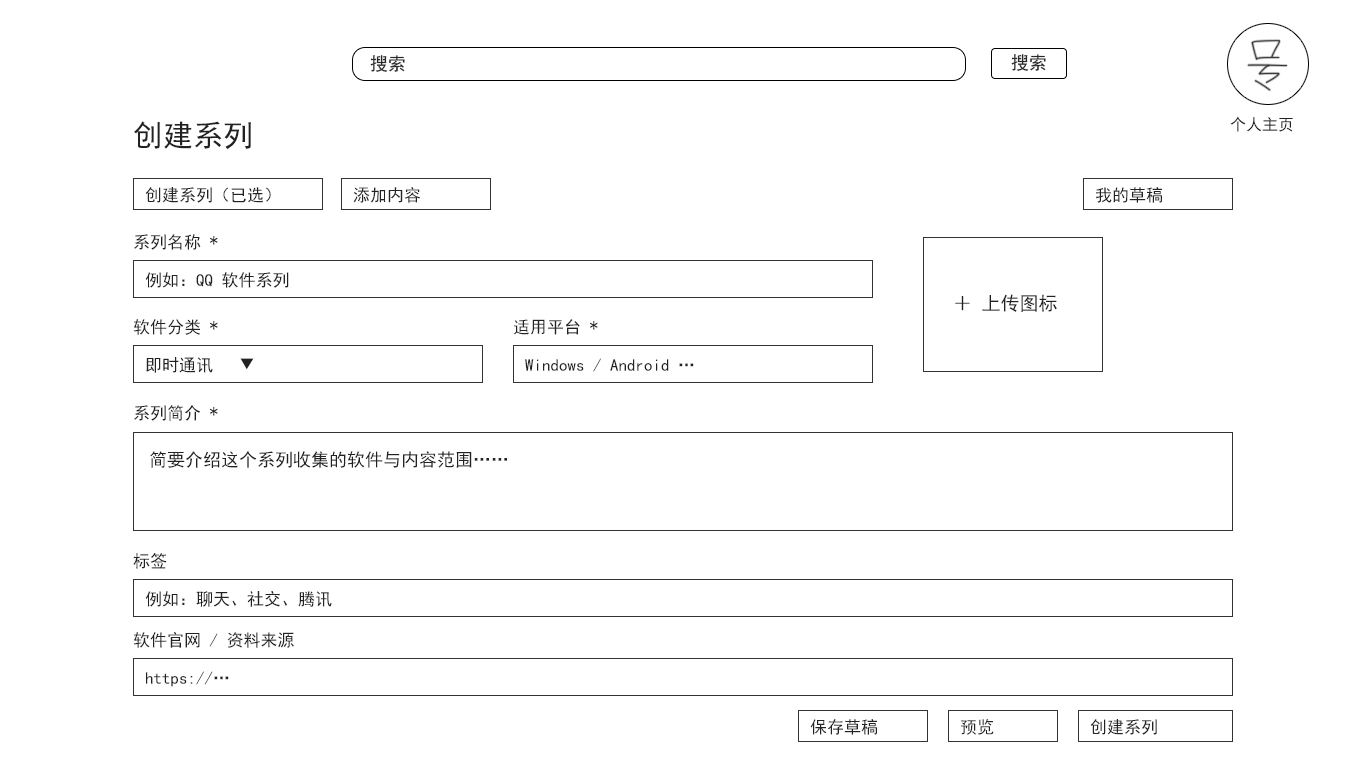
<style>
.page{position:relative;width:1366px;height:768px;background:#ffffff}
.page>*{position:absolute;margin:0}
.t1{font:18px "SimHei";color:#282828}
.t2{font:30px "SimHei";color:#222222}
.t3{font:16px "SimHei";color:#222222}
.t4{font:17px "SimHei";color:#222222}
.t5{font:19px "SimHei";color:#222222}
.t6{font:18px "SimHei";color:#222222}
</style>
<div class="page">
<p class="t1" style="left:1011px;top:54px;width:35px;height:17px">搜索</p>
<p class="t1" style="left:370px;top:55px;width:35px;height:17px">搜索</p>
<p class="t2" style="left:134px;top:121px;width:117px;height:29px">创建系列</p>
<p class="t3" style="left:1230px;top:116px;width:63px;height:16px">个人主页</p>
<p class="t4" style="left:145px;top:187px;width:126px;height:16px">创建系列（已选）</p>
<p class="t4" style="left:353px;top:187px;width:67px;height:16px">添加内容</p>
<p class="t4" style="left:1096px;top:187px;width:66px;height:16px">我的草稿</p>
<p class="t4" style="left:134px;top:234px;width:84px;height:16px">系列名称 *</p>
<p class="t4" style="left:145px;top:272px;width:144px;height:16px">例如：QQ 软件系列</p>
<p class="t5" style="left:955px;top:294px;width:102px;height:18px">＋ 上传图标</p>
<p class="t4" style="left:133px;top:319px;width:85px;height:16px">软件分类 *</p>
<p class="t4" style="left:514px;top:319px;width:84px;height:16px">适用平台 *</p>
<p class="t4" style="left:146px;top:357px;width:108px;height:16px">即时通讯   ▼</p>
<p class="t4" style="left:525px;top:358px;width:169px;height:14px">Windows / Android …</p>
<p class="t4" style="left:134px;top:405px;width:84px;height:16px">系列简介 *</p>
<p class="t6" style="left:150px;top:451px;width:357px;height:17px">简要介绍这个系列收集的软件与内容范围……</p>
<p class="t4" style="left:133px;top:553px;width:34px;height:16px">标签</p>
<p class="t4" style="left:145px;top:591px;width:187px;height:16px">例如：聊天、社交、腾讯</p>
<p class="t4" style="left:133px;top:631px;width:161px;height:17px">软件官网 / 资料来源</p>
<p class="t4" style="left:146px;top:671px;width:83px;height:16px">https://…</p>
<p class="t4" style="left:810px;top:719px;width:67px;height:16px">保存草稿</p>
<p class="t4" style="left:961px;top:719px;width:33px;height:16px">预览</p>
<p class="t4" style="left:1090px;top:719px;width:67px;height:16px">创建系列</p>
</div>
